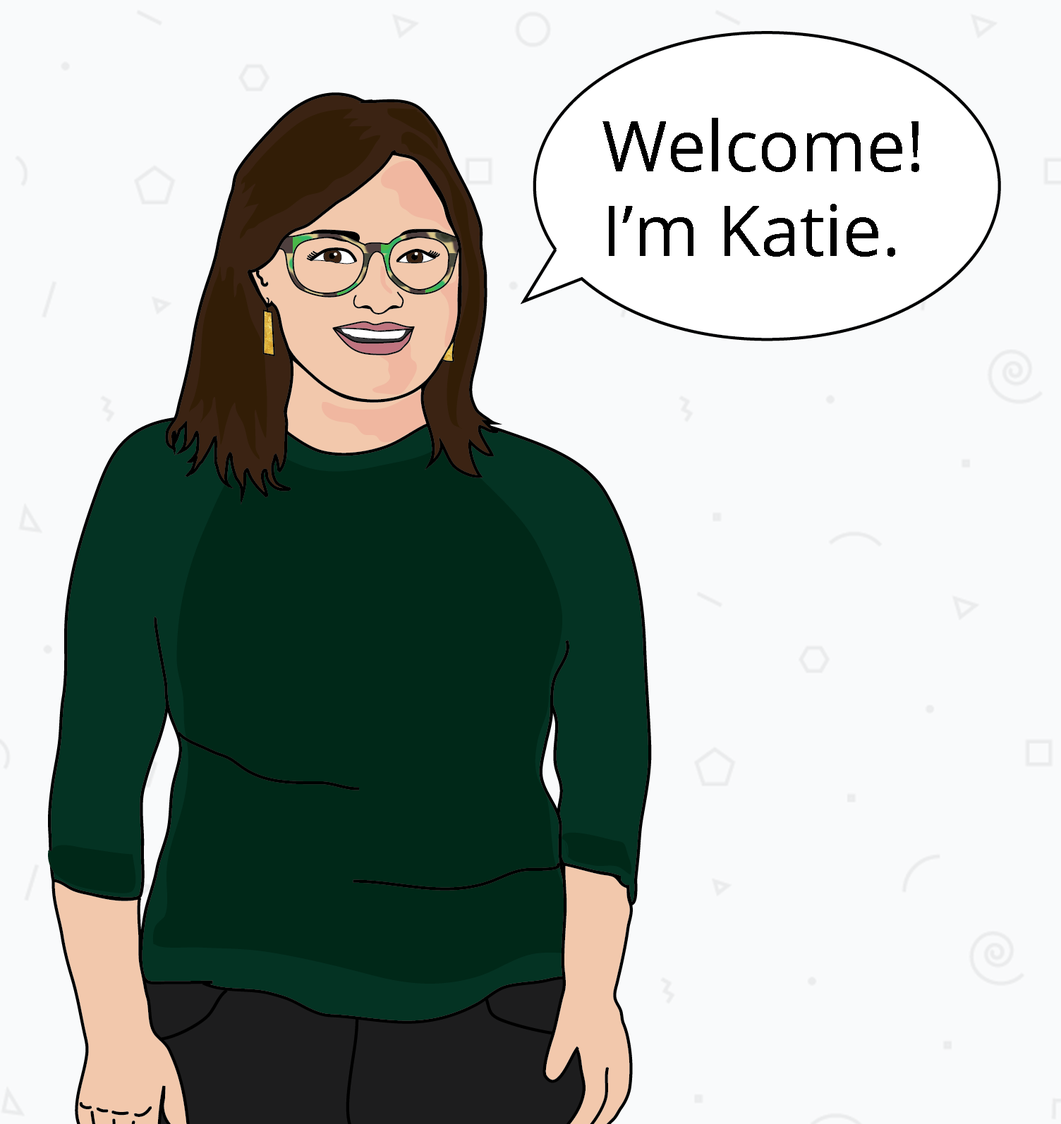
<style>
.page{position:relative;width:1061px;height:1124px;background:#f9fafb}
.page>*{position:absolute;margin:0}
.t1{font:70.5px "OpenSans";color:#000000}
</style>
<div class="page">
<p class="t1" style="left:602px;top:118px;width:317px;height:139px">Welcome!<br>I’m Katie.</p>
</div>
